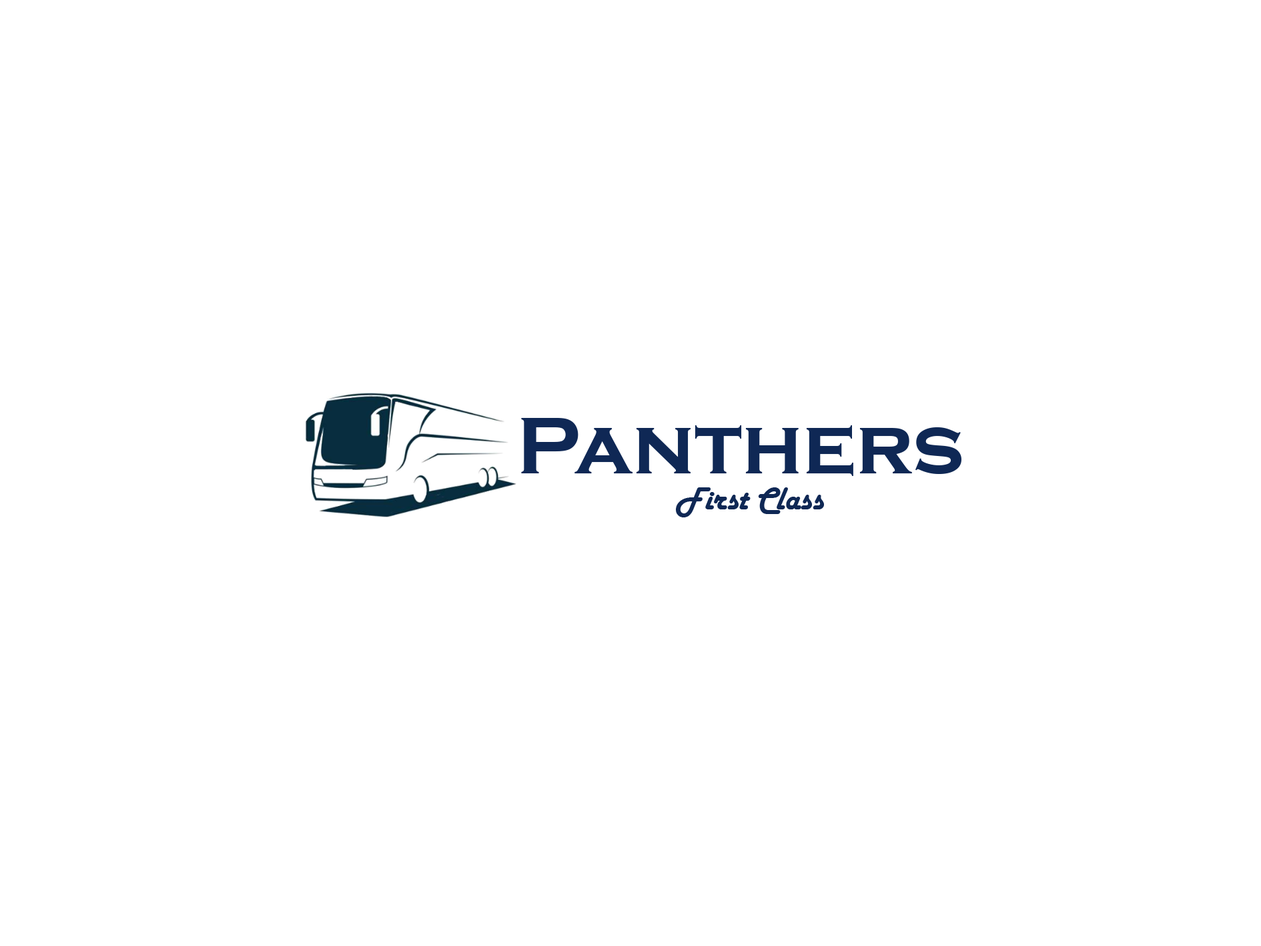
<style>
.page{position:relative;width:1261px;height:946px;background:#ffffff}
.page>*{position:absolute;margin:0}
.t1{font:83.4px "CopperplateGothic-Bold";color:#0f2855}
.t2{font:33.4px "HarlowSolid";color:#0f2855}
</style>
<div class="page">
<p class="t1" style="left:521px;top:418px;width:441px;height:58px">Panthers</p>
<p class="t2" style="left:676px;top:487px;width:148px;height:30px">First Class</p>
</div>
